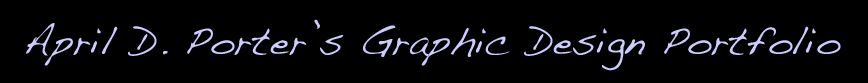
<style>
.page{position:relative;width:868px;height:83px;background:#000000}
.page>*{position:absolute;margin:0}
.t1{font:39.2px "Handwriting-Dakota";color:#ccccff}
</style>
<div class="page">
<p class="t1" style="left:26px;top:19px;width:815px;height:52px">April D. Porter’s Graphic Design Portfolio</p>
</div>
